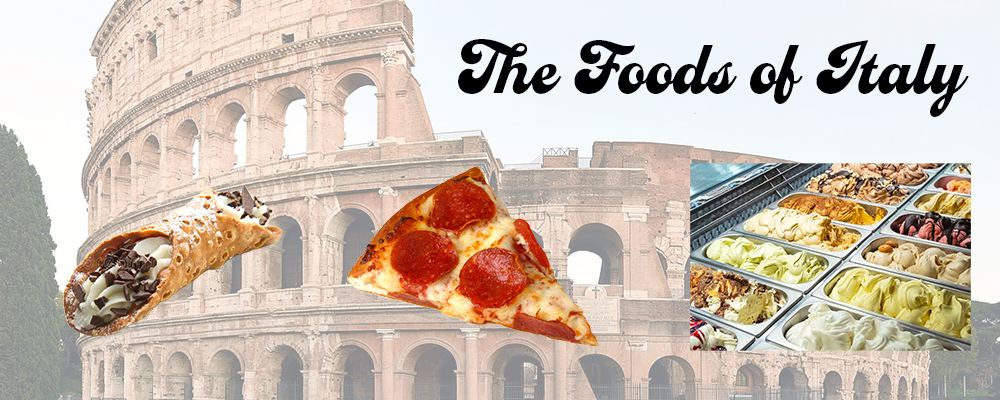
<style>
.page{position:relative;width:1000px;height:400px}
.page>*{position:absolute;margin:0}
.t1{font:81.5px "Casey-Bold";color:#000000}
</style>
<div class="page">
<p class="t1" style="left:458px;top:39px;width:511px;height:78px">The Foods of Italy</p>
</div>
